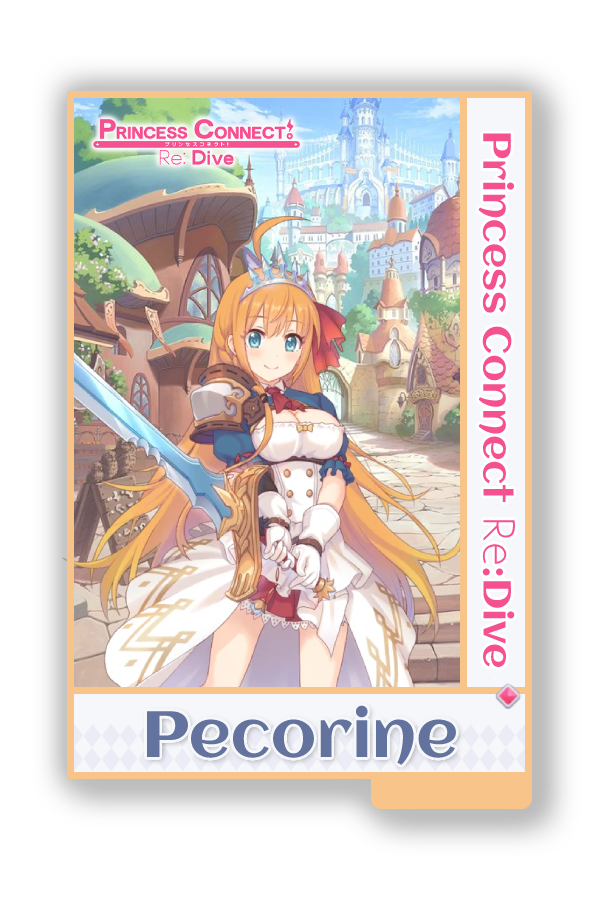
<style>
.page{position:relative;width:600px;height:900px;background:#ffffff}
.page>*{position:absolute;margin:0}
.t1{font:39px "Aclonica-Regular";color:#f55191}
.t2{font:39px "AaarghNormal";color:#f55191}
.t3{font:65px "Aclonica-Regular";color:#64739d}
</style>
<div class="page">
<p class="t1" style="left:478px;top:133px;width:38px;height:534px;rotate:90deg">Princess Connect <span class="t2">Re</span>:Dive</p>
<p class="t3" style="left:147px;top:705px;width:309px;height:60px">Pecorine</p>
</div>
